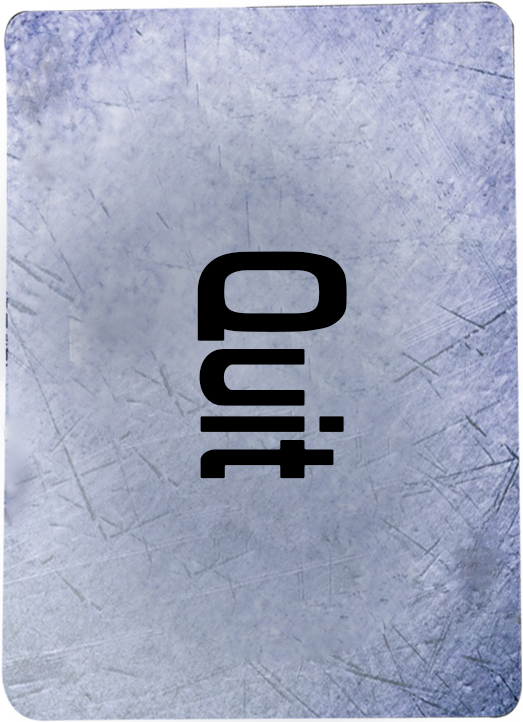
<style>
.page{position:relative;width:523px;height:722px}
.page>*{position:absolute;margin:0}
.t1{font:199.7px "Prototype";color:#000000;scale:0.64 1}
</style>
<div class="page">
<p class="t1" style="left:197px;top:251px;width:150px;height:228px;rotate:90deg">Quit</p>
</div>
